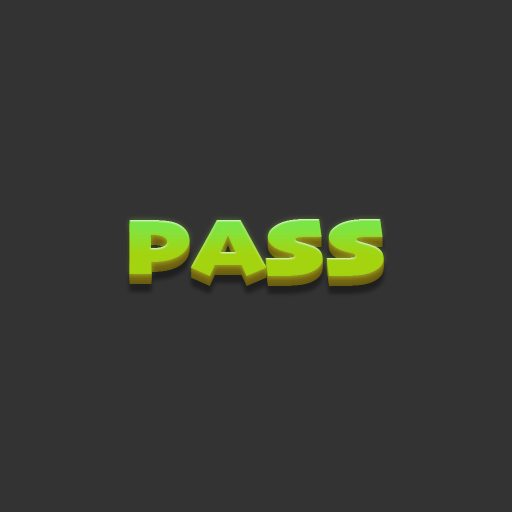
<style>
.page{position:relative;width:512px;height:512px;background:#333333}
.page>*{position:absolute;margin:0}
.t1{font:83.3px "Skia-BlackExtended";letter-spacing:-0.005em;text-transform:uppercase;scale:0.95 1}
</style>
<div class="page">
<p class="t1" style="left:129px;top:219px;width:255px;height:57px">pass</p>
</div>
